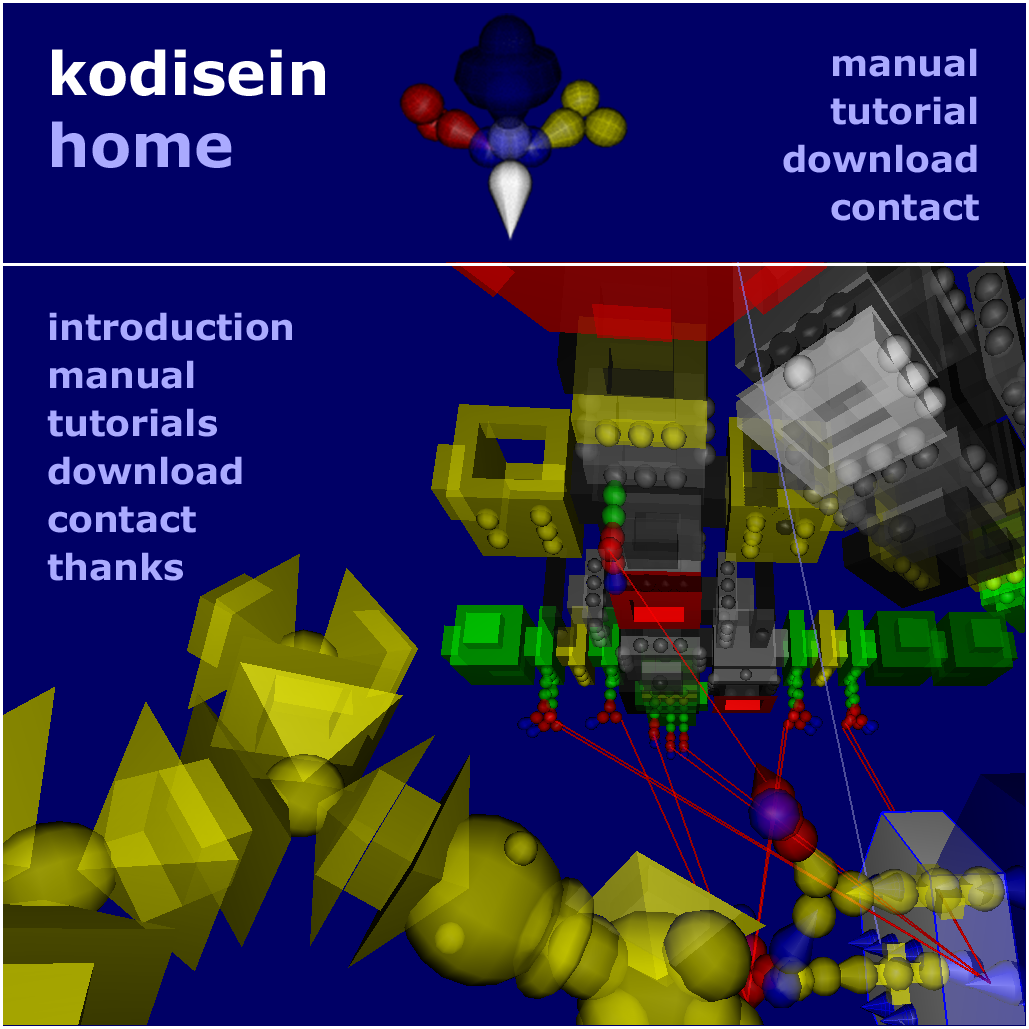
<style>
.page{position:relative;width:1029px;height:1029px;background:#000066}
.page>*{position:absolute;margin:0}
.t1{font:60px "Verdana-Bold";color:#ffffff}
.t2{font:36px/48px "Verdana-Bold";color:#aaaaff}
.t3{font:60px "Verdana-Bold";color:#aaaaff}
</style>
<div class="page">
<p class="t1" style="left:52px;top:49px;width:273px;height:47px">kodisein</p>
<p class="t2" style="left:783px;top:48px;width:196px;height:173px;text-align:right">manual<br>tutorial<br>download<br>contact</p>
<p class="t3" style="left:52px;top:121px;width:180px;height:47px"><span class="t1"><br></span>home</p>
<p class="t2" style="left:47px;top:312px;width:245px;height:269px">introduction<br>manual<br>tutorials<br>download<br>contact<br>thanks</p>
</div>
